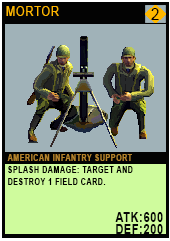
<style>
.page{position:relative;width:170px;height:241px;background:#a0b2b8}
.page>*{position:absolute;margin:0}
.t1{font:12.8px "ArialMT";letter-spacing:0.08em;color:#ffb800;text-transform:uppercase;scale:0.86 1}
.t2{font:17.4px "ArialMT";letter-spacing:0.08em;color:#000003;text-transform:uppercase;scale:0.86 1}
.t3{font:9.3px/12.2px "Arial-BoldMT";letter-spacing:0.08em;color:#020100;text-transform:uppercase;scale:0.76 1}
.t4{font:9.3px/20.2px "Arial-BoldMT";letter-spacing:0.08em;color:#b4832c;text-transform:uppercase;scale:0.76 1}
.t5{font:13.9px/12px "Arial-BoldMT";letter-spacing:0.08em;color:#050606;text-transform:uppercase;scale:0.76 1}
</style>
<div class="page">
<p class="t1" style="left:6px;top:6px;width:53px;height:10px">mortor</p>
<p class="t2" style="left:151px;top:8px;width:8px;height:12px">2</p>
<p class="t3" style="left:7px;top:154px;width:156px;height:80px"><span class="t4">american infantry support<br></span>splash damage: Target and Destroy 1 field card.<br><br><br><span class="t5">atk:600<br>def:200</span></p>
</div>
